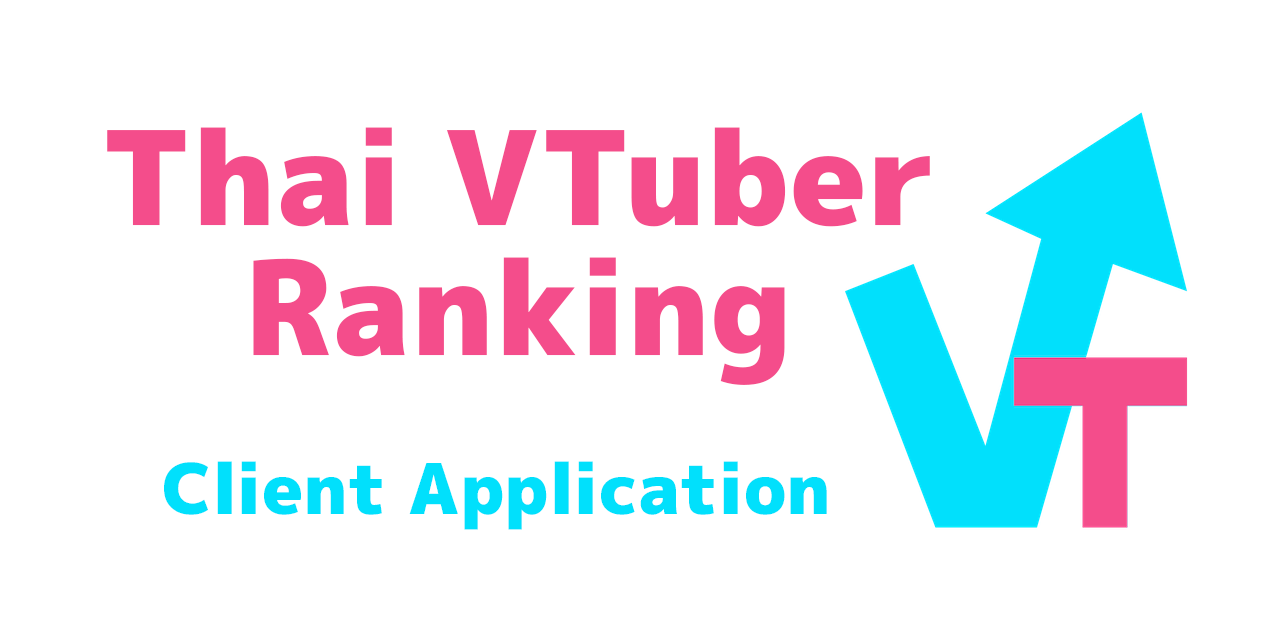
<style>
.page{position:relative;width:1280px;height:640px;background:#ffffff}
.page>*{position:absolute;margin:0}
.t1{font:130px/130px "Mplus1p-Black";color:#f44d8b}
.t2{font:70px "Mplus1p-Black";color:#01e0fc}
</style>
<div class="page">
<p class="t1" style="left:107px;top:127px;width:823px;height:258px;text-align:center">Thai VTuber<br>Ranking</p>
<p class="t2" style="left:164px;top:461px;width:663px;height:69px">Client Application</p>
</div>
